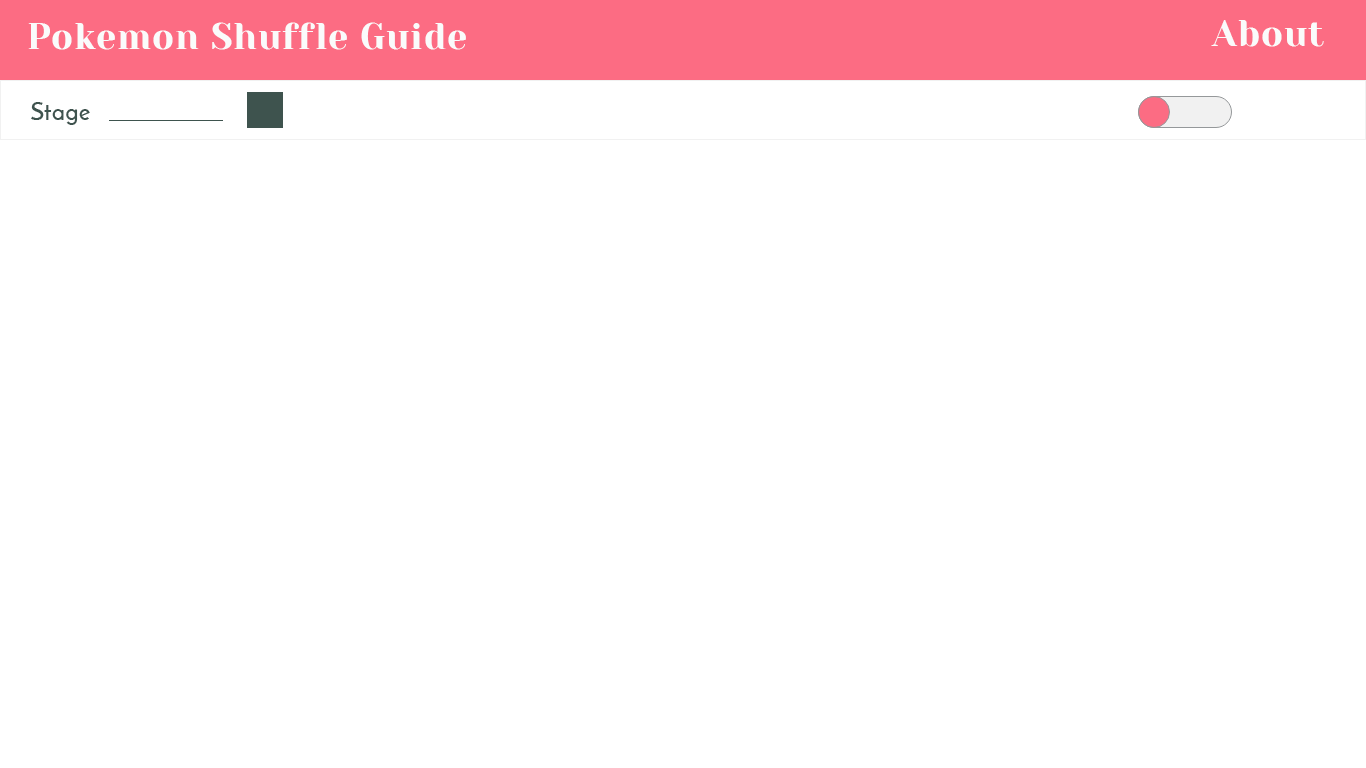
<style>
.page{position:relative;width:1366px;height:768px;background:#ffffff}
.page>*{position:absolute;margin:0}
.t1{font:36px "YesevaOne";letter-spacing:0.025em;color:#fafbfb}
.t2{font:24px "JosefinSans-SemiBold";letter-spacing:0.025em;color:#3e534e}
</style>
<div class="page">
<p class="t1" style="left:28px;top:22px;width:438px;height:28px">Pokemon Shuffle Guide</p>
<p class="t1" style="left:1211px;top:20px;width:113px;height:27px">About</p>
<p class="t2" style="left:31px;top:102px;width:59px;height:23px">Stage</p>
</div>
